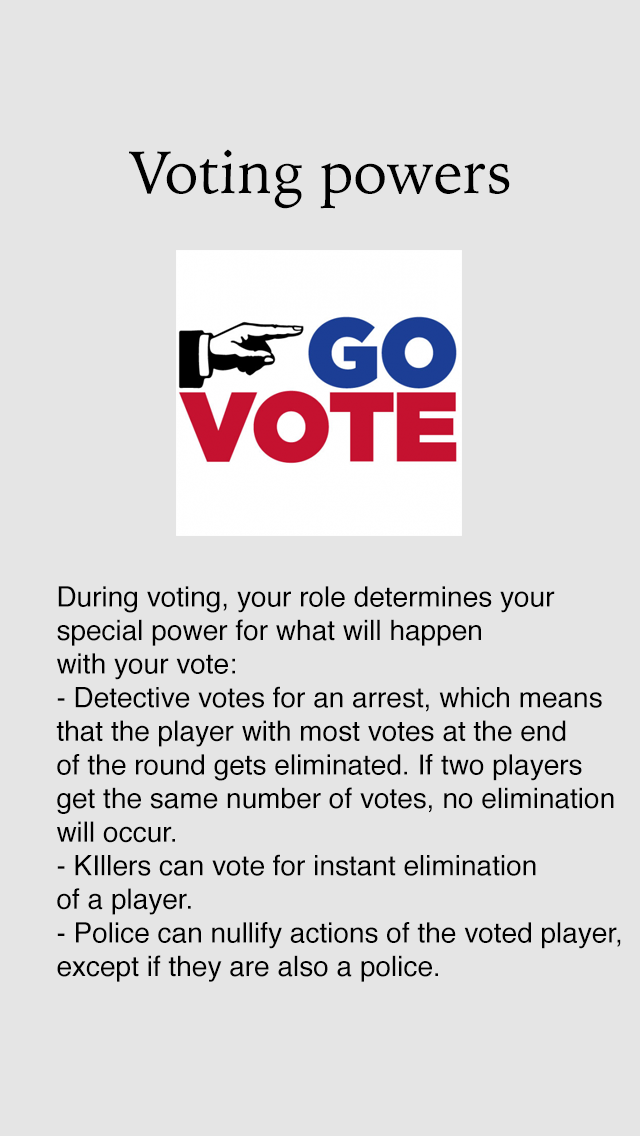
<style>
.page{position:relative;width:640px;height:1136px;background:#e5e5e5}
.page>*{position:absolute;margin:0}
.t1{font:60px "IowanOldStyle-Roman";color:#000000}
.t2{font:28px "Helvetica";color:#000000}
</style>
<div class="page">
<p class="t1" style="left:129px;top:149px;width:381px;height:60px">Voting powers</p>
<p class="t2" style="left:56px;top:586px;width:565px;height:396px">During voting, your role determines your <br>special power for what will happen <br>with your vote:<br>- Detective votes for an arrest, which means<br>that the player with most votes at the end<br>of the round gets eliminated. If two players<br>get the same number of votes, no elimination<br>will occur.<br>- KIllers can vote for instant elimination<br>of a player.<br>- Police can nullify actions of the voted player,<br>except if they are also a police.</p>
</div>
